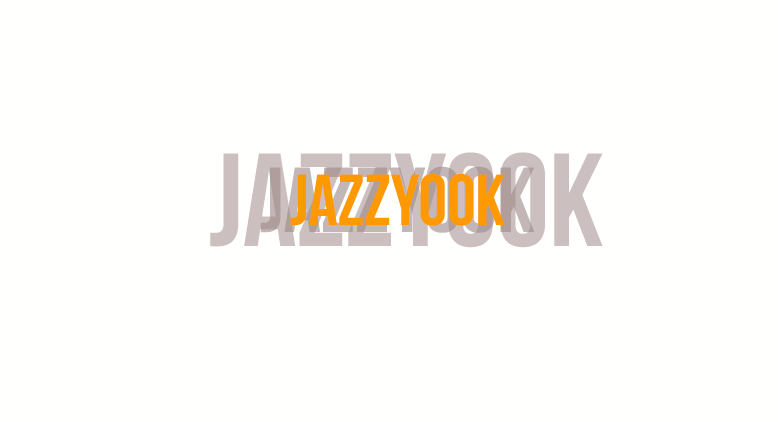
<style>
.page{position:relative;width:778px;height:422px;background:#fffffe}
.page>*{position:absolute;margin:0}
.t1{font:132px "BebasNeue";color:#cbc0bf}
.t2{font:92px "BebasNeue"}
.t3{font:72px "BebasNeue";color:#ff9900}
</style>
<div class="page">
<p class="t1" style="left:210px;top:152px;width:393px;height:96px">jAzzyook</p>
<p class="t2" style="left:260px;top:166px;width:275px;height:67px">jazzyook</p>
<p class="t3" style="left:290px;top:174px;width:215px;height:52px">jazzyook</p>
</div>
